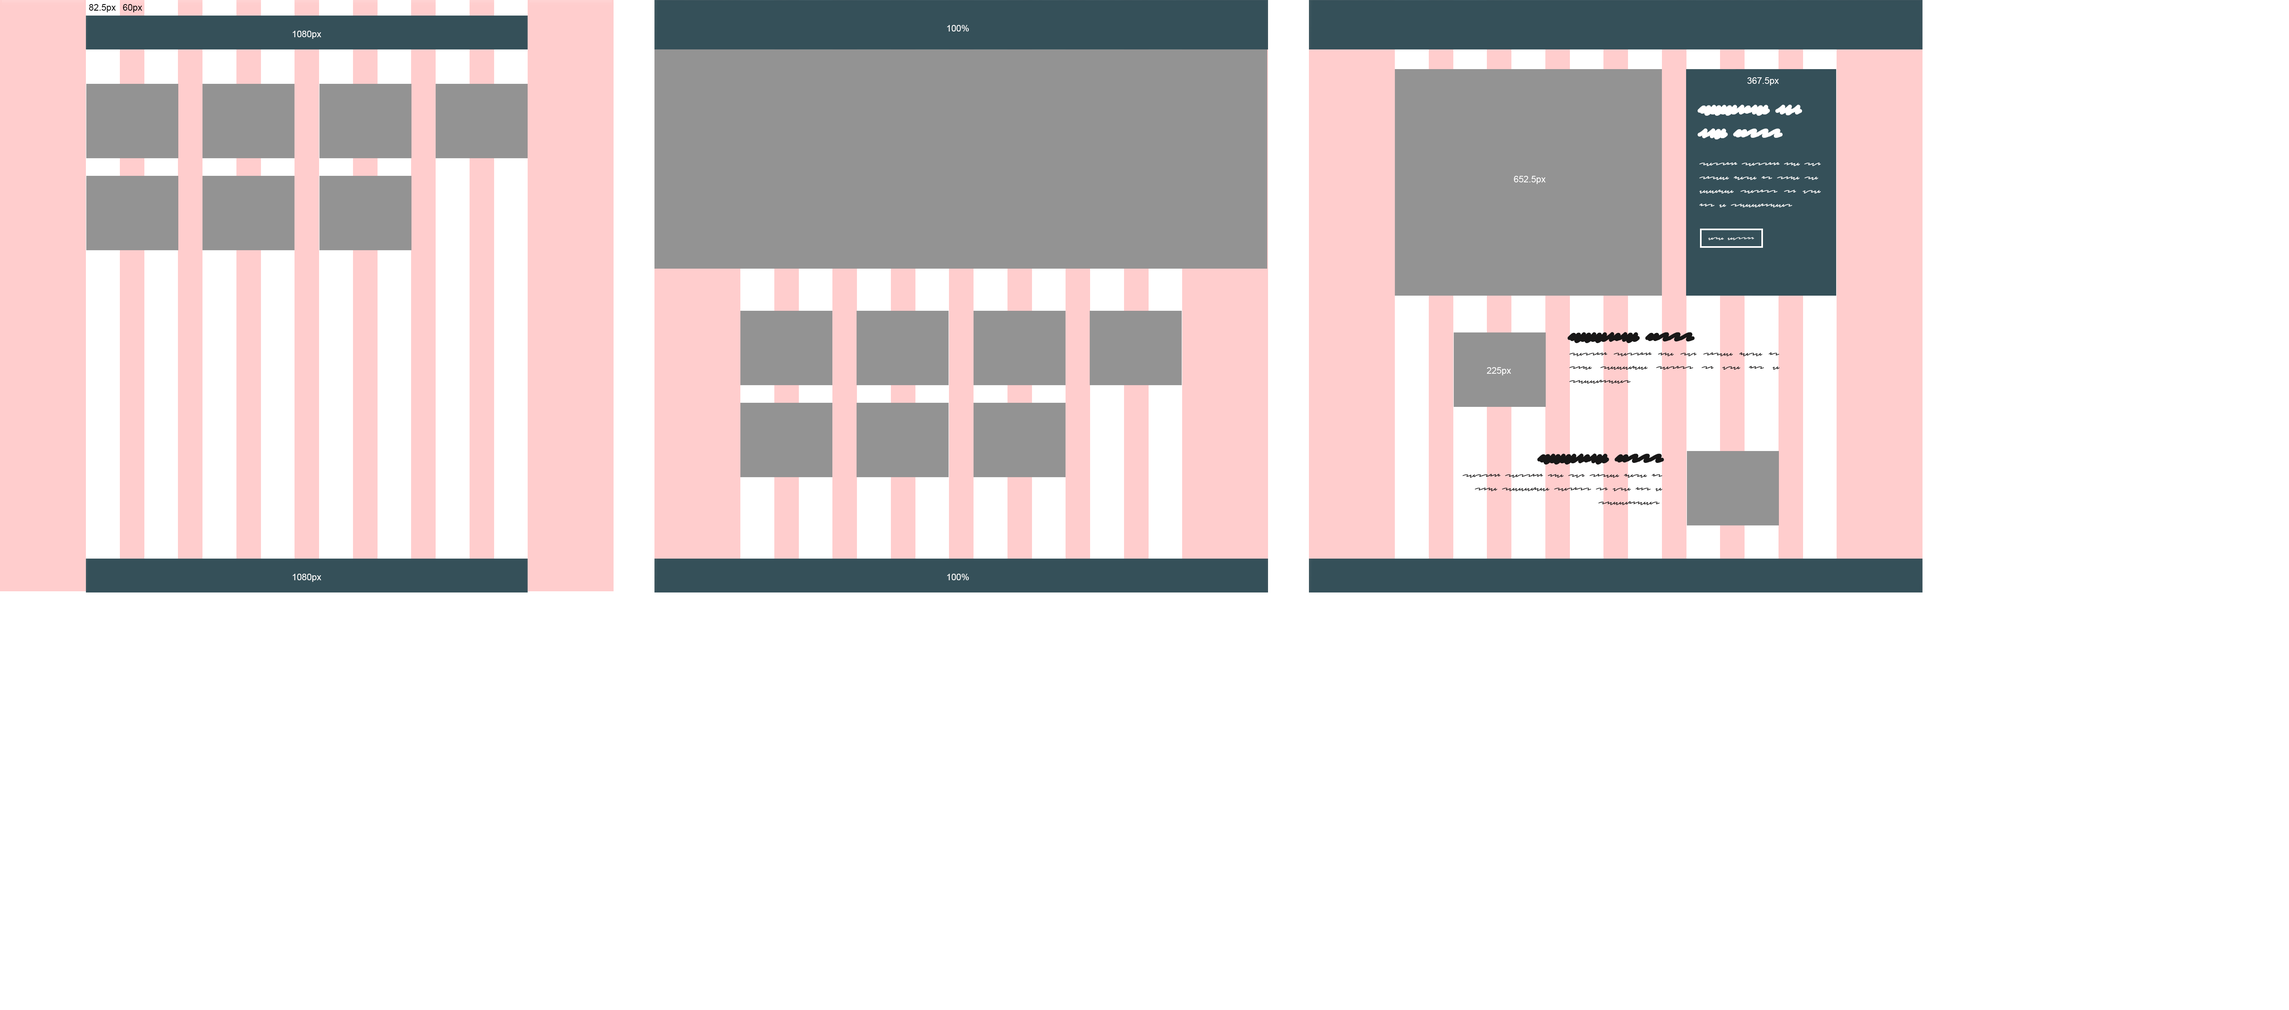
<style>
.page{position:relative;width:2289px;height:1010px;background:#ffffff}
.page>*{position:absolute;margin:0}
.t1{font:9px "ArialMT";color:#000000}
.t2{font:9px "ArialMT";color:#ffffff}
.t3{font:11.5px "RedactedScript";color:#ffffff}
.t4{font:19.6px "RedactedScript-Bold";color:#ffffff}
.t5{font:9px "RedactedScript";color:#ffffff}
.t6{font:11.5px "RedactedScript";color:#181717}
.t7{font:19.6px "RedactedScript-Bold";color:#181717}
</style>
<div class="page">
<p class="t1" style="left:89px;top:4px;width:27px;height:8px">82.5px</p>
<p class="t1" style="left:123px;top:4px;width:19px;height:8px">60px</p>
<p class="t2" style="left:947px;top:25px;width:22px;height:7px">100%</p>
<p class="t2" style="left:292px;top:31px;width:30px;height:8px">1080px</p>
<p class="t2" style="left:1747px;top:77px;width:32px;height:9px">367.5px</p>
<p class="t3" style="left:1698px;top:105px;width:123px;height:102px"><span class="t4">Headline num one FIRST<br></span><br>testing testing one two three here is some redacfed script to use for a placeholder.</p>
<p class="t2" style="left:1514px;top:176px;width:32px;height:8px">652.5px</p>
<p class="t5" style="left:1708px;top:237px;width:47px;height:3px">CTA Button</p>
<p class="t6" style="left:1568px;top:332px;width:212px;height:52px;text-align:justify"><span class="t7">HEADLINE FIRST<br></span>testing testing one two three here is some redacfed script to use for a placeholder.</p>
<p class="t2" style="left:1487px;top:367px;width:24px;height:9px">225px</p>
<p class="t6" style="left:1462px;top:454px;width:202px;height:51px;text-align:right"><span class="t7">HEADLINE FIRST<br></span>testing testing one two three here is some redacfed script to use for a placeholder.</p>
<p class="t2" style="left:292px;top:574px;width:30px;height:8px">1080px</p>
<p class="t2" style="left:947px;top:574px;width:22px;height:6px">100%</p>
</div>
